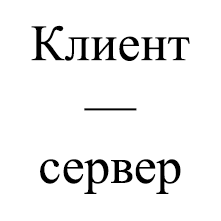
<style>
.page{position:relative;width:221px;height:221px;background:#ffffff}
.page>*{position:absolute;margin:0}
.t1{font:51.1px "TimesNewRomanPSMT";color:#000000}
</style>
<div class="page">
<p class="t1" style="left:31px;top:25px;width:159px;height:169px;text-align:center">Клиент<br>—<br>сервер</p>
</div>
